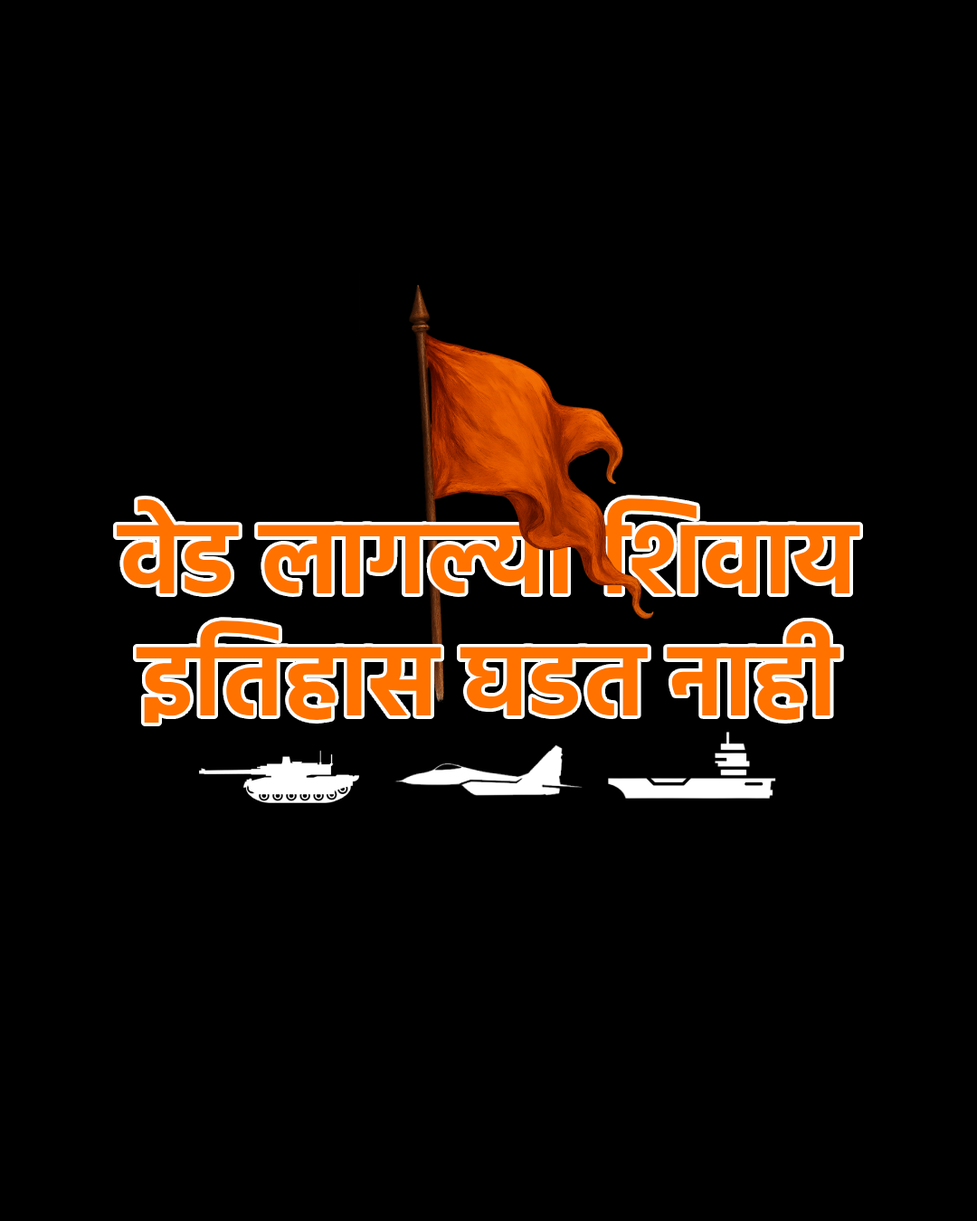
<style>
.page{position:relative;width:977px;height:1221px;background:#000000}
.page>*{position:absolute;margin:0}
.t1{font:101.8px "Hind-Bold";color:#ff7200}
</style>
<div class="page">
<p class="t1" style="left:117px;top:498px;width:743px;height:225px;text-align:center">वेड लागल्या शिवाय<br>इतिहास घडत नाही</p>
</div>
